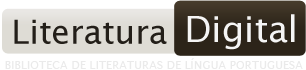
<style>
.page{position:relative;width:306px;height:70px;background:#ffffff}
.page>*{position:absolute;margin:0}
.t1{font:11.3px "LucidaSans";color:#eaeaea;text-transform:uppercase}
</style>
<div class="page">
<p class="t1" style="left:5px;top:58px;width:298px;height:11px">Biblioteca de Literaturas de Língua Portuguesa</p>
</div>
